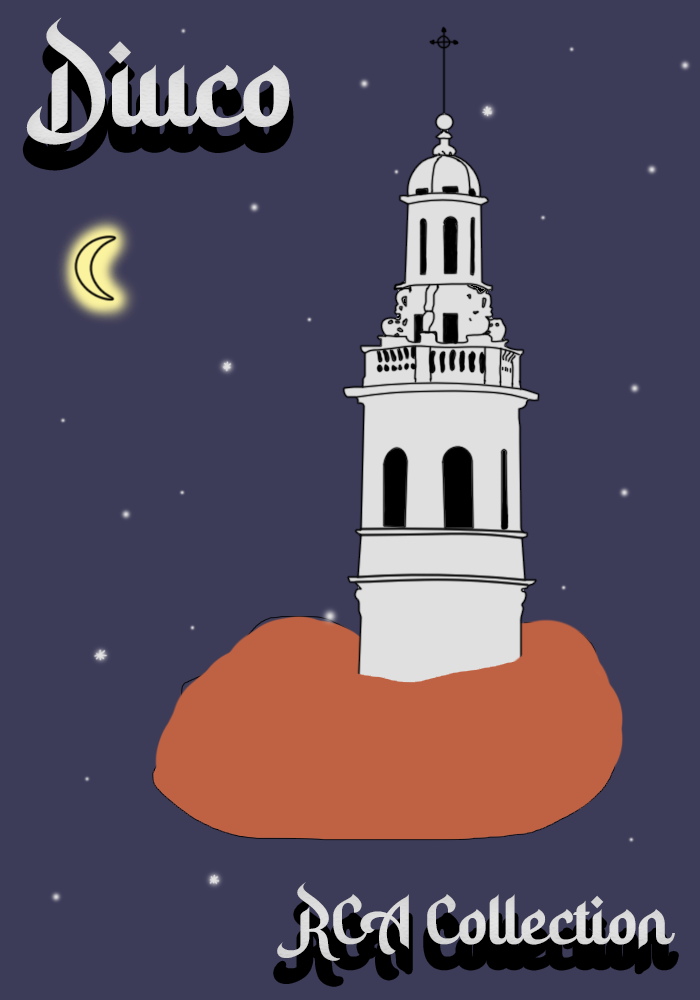
<style>
.page{position:relative;width:700px;height:1000px;background:#3c3b58}
.page>*{position:absolute;margin:0}
.t1{font:101.7px "HidayatullahDEMO";color:#f6f5f5}
.t2{font:58.3px "HidayatullahDEMO";color:#dcdbdb}
</style>
<div class="page">
<p class="t1" style="left:26px;top:17px;width:264px;height:128px">Diuco</p>
<p class="t2" style="left:277px;top:882px;width:398px;height:79px">RCA Collection</p>
</div>
